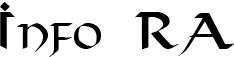
<style>
.page{position:relative;width:234px;height:57px;background:#ffffff}
.page>*{position:absolute;margin:0}
.t1{font:48px "Viking-Medium";color:#000000;font-variant:small-caps}
</style>
<div class="page">
<p class="t1" style="left:0px;top:2px;width:234px;height:55px">Info RA</p>
</div>
